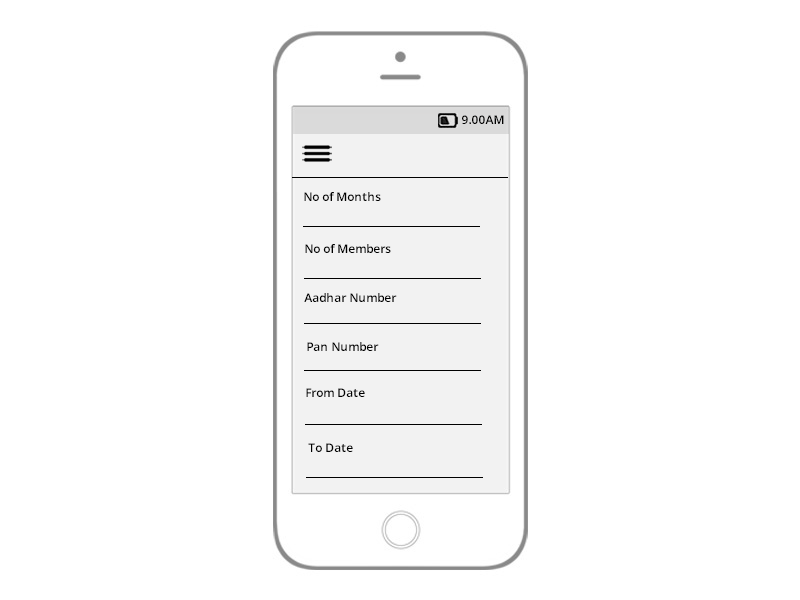
<style>
.page{position:relative;width:800px;height:600px;background:#ffffff}
.page>*{position:absolute;margin:0}
.t1{font:12px "OpenSans-Semibold";color:#000000}
</style>
<div class="page">
<p class="t1" style="left:462px;top:115px;width:42px;height:9px">9.00AM</p>
<p class="t1" style="left:304px;top:192px;width:77px;height:9px">No of Months</p>
<p class="t1" style="left:305px;top:244px;width:86px;height:9px">No of Members</p>
<p class="t1" style="left:304px;top:293px;width:93px;height:9px">Aadhar Number</p>
<p class="t1" style="left:307px;top:342px;width:72px;height:9px">Pan Number</p>
<p class="t1" style="left:306px;top:388px;width:59px;height:9px">From Date</p>
<p class="t1" style="left:308px;top:443px;width:45px;height:9px">To Date</p>
</div>
